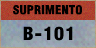
<style>
.page{position:relative;width:96px;height:48px}
.page>*{position:absolute;margin:0}
.t1{font:12px "HelveticaLT-Condensed-Black";letter-spacing:0.02em;color:#000000;scale:1.05 1}
</style>
<div class="page">
<p class="t1" style="left:13px;top:5px;width:69px;height:10px">SUPRIMENTO</p>
</div>
